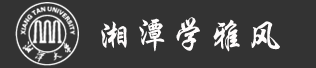
<style>
.page{position:relative;width:316px;height:68px;background:#333333}
.page>*{position:absolute;margin:0}
.t1{font:36px "STXingkai";letter-spacing:0.1em;color:#fefcfc;scale:0.95 1}
</style>
<div class="page">
<p class="t1" style="left:101px;top:17px;width:179px;height:35px">湘潭学雅风</p>
</div>
